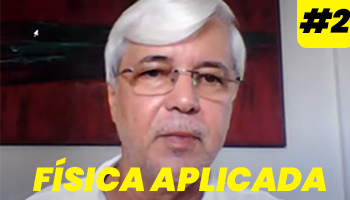
<style>
.page{position:relative;width:350px;height:200px}
.page>*{position:absolute;margin:0}
.t1{font:33.3px "Poppins-BlackItalic";color:#000000}
.t2{font:33.3px "Poppins-BlackItalic";color:#fff600}
</style>
<div class="page">
<p class="t1" style="left:299px;top:8px;width:52px;height:25px">#2</p>
<p class="t2" style="left:33px;top:157px;width:293px;height:35px">FÍSICA APLICADA</p>
</div>
